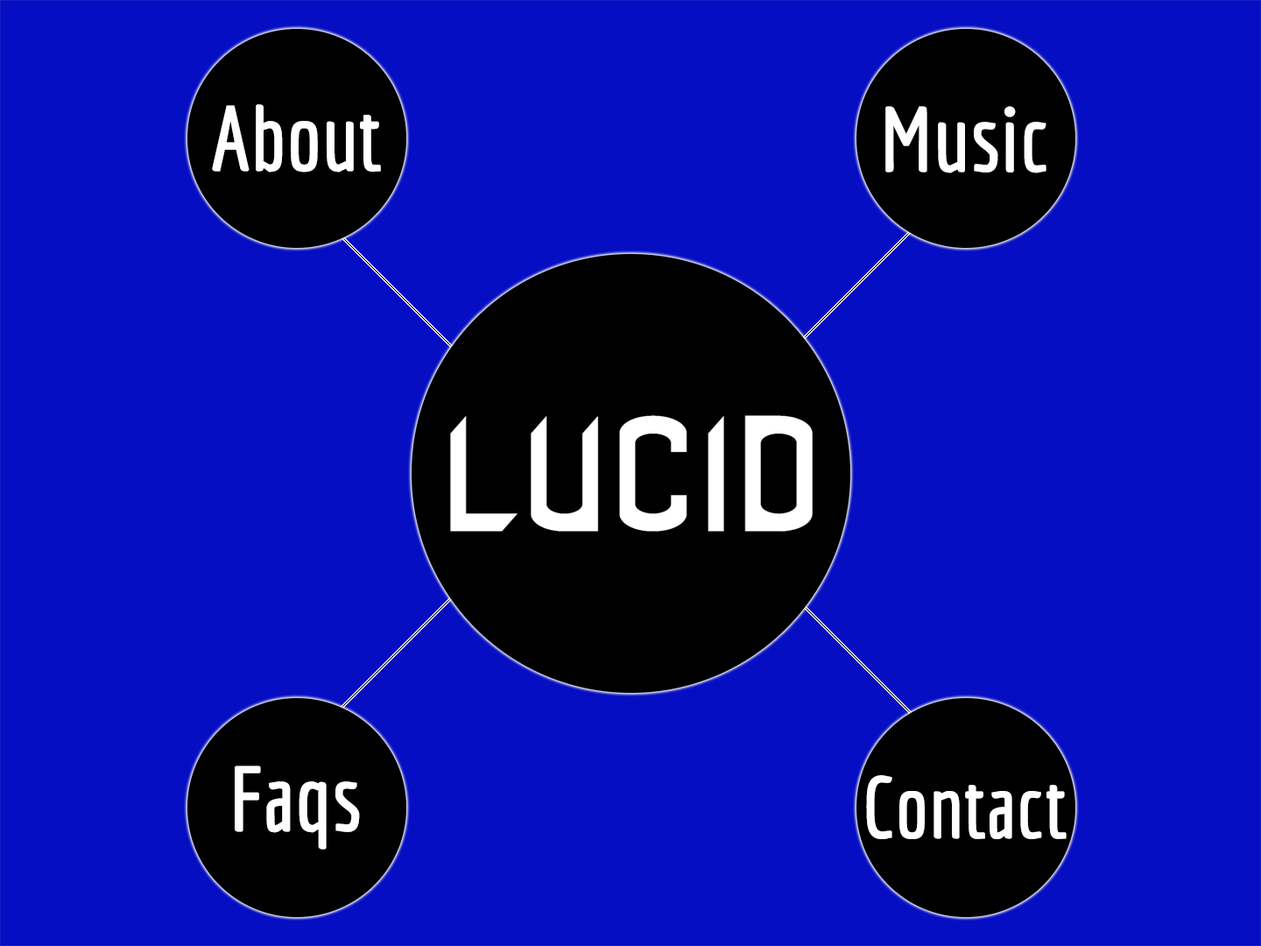
<style>
.page{position:relative;width:1261px;height:946px;background:#050ec3}
.page>*{position:absolute;margin:0}
.t1{font:87.6px "Economica-Regular";color:#ffffff;font-weight:bold}
.t2{font:83.2px "Economica-Regular";color:#ffffff;font-weight:bold}
</style>
<div class="page">
<p class="t1" style="left:212px;top:104px;width:169px;height:69px">About</p>
<p class="t1" style="left:885px;top:106px;width:161px;height:67px">Music</p>
<p class="t1" style="left:235px;top:765px;width:125px;height:84px">Faqs</p>
<p class="t2" style="left:866px;top:775px;width:201px;height:64px">Contact</p>
</div>
